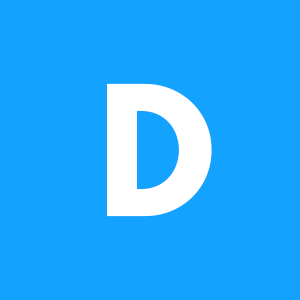
<style>
.page{position:relative;width:300px;height:300px;background:#13a3ff}
.page>*{position:absolute;margin:0}
.t1{font:160px "LeagueSpartan-Bold";letter-spacing:-0.06em;color:#ffffff;text-transform:uppercase}
</style>
<div class="page">
<p class="t1" style="left:107px;top:83px;width:105px;height:134px">D</p>
</div>
